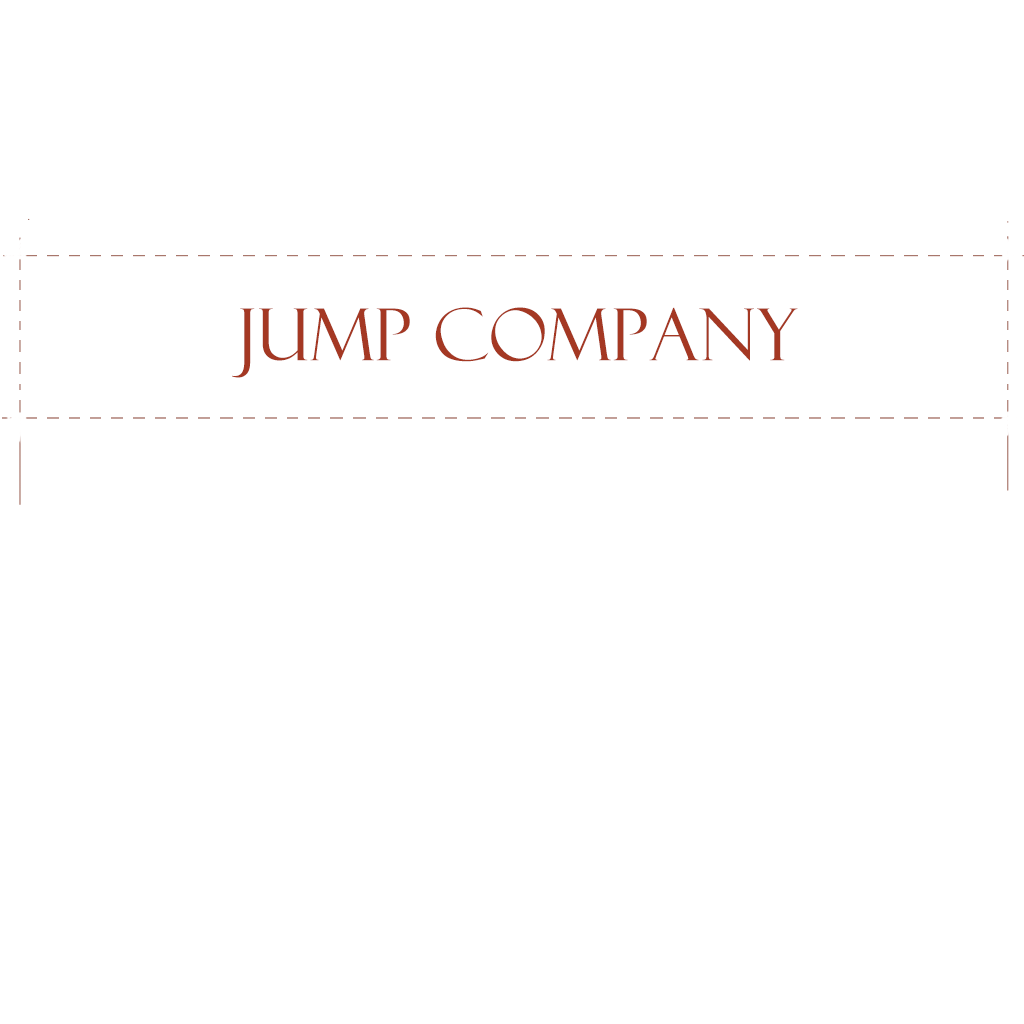
<style>
.page{position:relative;width:1024px;height:1024px;background:#ffffff}
.page>*{position:absolute;margin:0}
.t1{font:72px "FelixTitlingMT";color:#a43823}
</style>
<div class="page">
<p class="t1" style="left:232px;top:307px;width:566px;height:71px">jump company</p>
</div>
